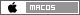
<style>
.page{position:relative;width:80px;height:15px;background:#959595}
.page>*{position:absolute;margin:0}
.t1{font:8px "04b03b";color:#ffffff}
</style>
<div class="page">
<p class="t1" style="left:30px;top:5px;width:25px;height:5px">MACOS</p>
</div>
